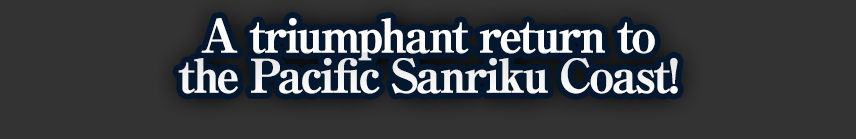
<style>
.page{position:relative;width:856px;height:139px;background:#333333}
.page>*{position:absolute;margin:0}
.t1{font:46px/40px "RyuminPro-ExBold";letter-spacing:-0.08em;color:#ffffff;font-weight:bold}
</style>
<div class="page">
<p class="t1" style="left:178px;top:18px;width:500px;height:76px;text-align:center">A triumphant return to<br>the Pacific Sanriku Coast!</p>
</div>
